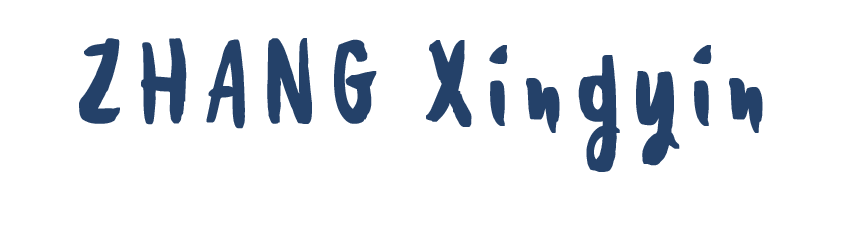
<style>
.page{position:relative;width:842px;height:230px;background:#ffffff}
.page>*{position:absolute;margin:0}
.t1{font:152.6px "HoneyvoidDEMO";letter-spacing:0.18em;color:#244169;font-weight:bold;scale:0.64 1}
</style>
<div class="page">
<p class="t1" style="left:79px;top:38px;width:684px;height:134px">ZHANG Xingyin</p>
</div>
